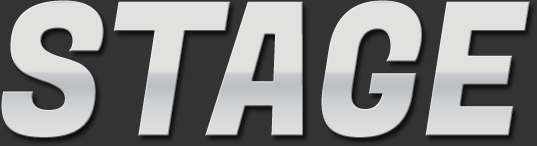
<style>
.page{position:relative;width:537px;height:146px;background:#333333}
.page>*{position:absolute;margin:0}
.t1{font:185.2px "FugazOne-Regular";color:#dfdfdf;scale:0.89 1}
</style>
<div class="page">
<p class="t1" style="left:1px;top:0px;width:529px;height:138px">STAGE</p>
</div>
